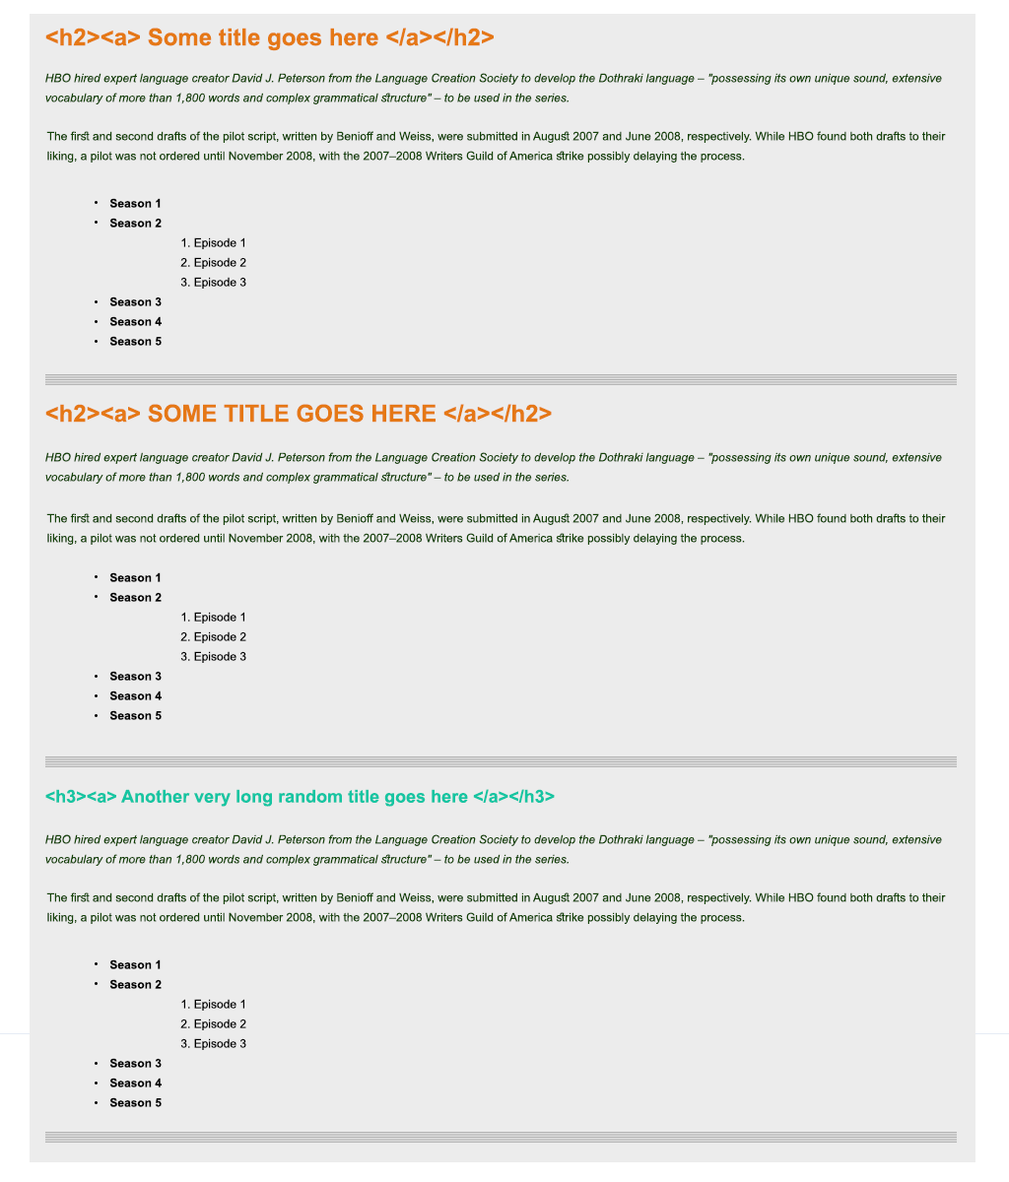
<style>
.page{position:relative;width:1009px;height:1182px;background:#ececec}
.page>*{position:absolute;margin:0}
.t1{font:23.6px "Arial-BoldMT";color:#e57816}
.t2{font:11.8px/19.7px "Arial-ItalicMT";color:#144307}
.t3{font:11.8px/19.7px "ArialMT";color:#144307}
.t4{font:11.8px/19.7px "ArialMT";color:#000000}
.t5{font:11.8px/19.7px "Arial-BoldMT";color:#000000}
.t6{font:17.7px "Arial-BoldMT";color:#16c5a2}
</style>
<div class="page">
<p class="t1" style="left:45px;top:28px;width:449px;height:23px">&lt;h2&gt;&lt;a&gt; Some title goes here &lt;/a&gt;&lt;/h2&gt;</p>
<p class="t2" style="left:45px;top:73px;width:897px;height:31px">HBO hired expert language creator David J. Peterson from the Language Creation Society to develop the Dothraki language – "possessing its own unique sound, extensive vocabulary of more than 1,800 words and complex grammatical structure" – to be used in the series.</p>
<p class="t3" style="left:46px;top:131px;width:900px;height:32px">The first and second drafts of the pilot script, written by Benioff and Weiss, were submitted in August 2007 and June 2008, respectively. While HBO found both drafts to their liking, a pilot was not ordered until November 2008, with the 2007–2008 Writers Guild of America strike possibly delaying the process.</p>
<p class="t4" style="left:109px;top:198px;width:137px;height:148px"><span class="t5">Season 1 <br>Season 2 <br>  </span>1. Episode 1<br>  2. Episode 2<br>  3. Episode 3<br><span class="t5">Season 3 <br>Season 4 <br>Season 5</span></p>
<p class="t1" style="left:45px;top:404px;width:507px;height:19px">&lt;h2&gt;&lt;a&gt; SOME TITLE GOES HERE &lt;/a&gt;&lt;/h2&gt;</p>
<p class="t2" style="left:45px;top:452px;width:897px;height:32px">HBO hired expert language creator David J. Peterson from the Language Creation Society to develop the Dothraki language – "possessing its own unique sound, extensive vocabulary of more than 1,800 words and complex grammatical structure" – to be used in the series.</p>
<p class="t3" style="left:46px;top:513px;width:900px;height:32px">The first and second drafts of the pilot script, written by Benioff and Weiss, were submitted in August 2007 and June 2008, respectively. While HBO found both drafts to their liking, a pilot was not ordered until November 2008, with the 2007–2008 Writers Guild of America strike possibly delaying the process.</p>
<p class="t4" style="left:109px;top:572px;width:137px;height:148px"><span class="t5">Season 1 <br>Season 2 <br>  </span>1. Episode 1<br>  2. Episode 2<br>  3. Episode 3<br><span class="t5">Season 3 <br>Season 4 <br>Season 5</span></p>
<p class="t6" style="left:45px;top:789px;width:510px;height:18px">&lt;h3&gt;&lt;a&gt; Another very long random title goes here &lt;/a&gt;&lt;/h3&gt;</p>
<p class="t2" style="left:45px;top:834px;width:897px;height:32px">HBO hired expert language creator David J. Peterson from the Language Creation Society to develop the Dothraki language – "possessing its own unique sound, extensive vocabulary of more than 1,800 words and complex grammatical structure" – to be used in the series.</p>
<p class="t3" style="left:46px;top:892px;width:900px;height:32px">The first and second drafts of the pilot script, written by Benioff and Weiss, were submitted in August 2007 and June 2008, respectively. While HBO found both drafts to their liking, a pilot was not ordered until November 2008, with the 2007–2008 Writers Guild of America strike possibly delaying the process.</p>
<p class="t4" style="left:109px;top:959px;width:137px;height:148px"><span class="t5">Season 1 <br>Season 2 <br>  </span>1. Episode 1<br>  2. Episode 2<br>  3. Episode 3<br><span class="t5">Season 3 <br>Season 4 <br>Season 5</span></p>
</div>
